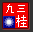
<style>
.page{position:relative;width:33px;height:32px;background:#f20000}
.page>*{position:absolute;margin:0}
.t1{font:10.4px "SimSun";color:#ffffff}
.t2{font:11.7px "SimSun";color:#ffffff}
</style>
<div class="page">
<p class="t1" style="left:6px;top:4px;width:19px;height:9px">九三</p>
<p class="t2" style="left:16px;top:15px;width:11px;height:12px">桂</p>
</div>
